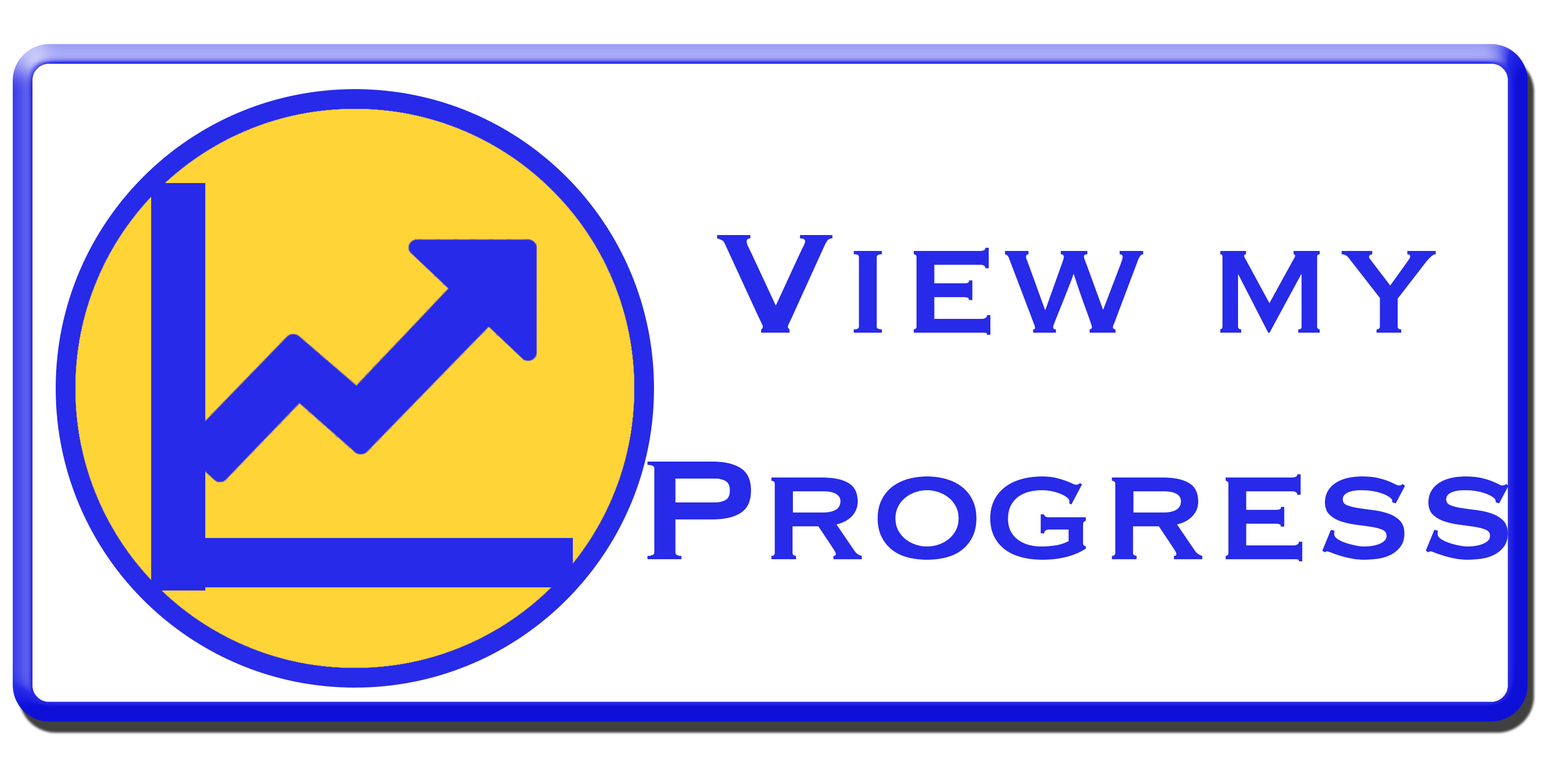
<style>
.page{position:relative;width:1561px;height:764px;background:#ffffff}
.page>*{position:absolute;margin:0}
.t1{font:185.7px "Copperplate";color:#272ae8}
</style>
<div class="page">
<p class="t1" style="left:647px;top:235px;width:862px;height:326px;text-align:center">View my<br>Progress</p>
</div>
